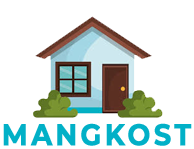
<style>
.page{position:relative;width:194px;height:149px;background:#ffffff}
.page>*{position:absolute;margin:0}
.t1{font:30px "Montserrat-Bold";letter-spacing:0.1em;color:#01b0c7;text-transform:uppercase;font-weight:bold;scale:0.9 1}
</style>
<div class="page">
<p class="t1" style="left:3px;top:123px;width:189px;height:23px">MANGKOST</p>
</div>
